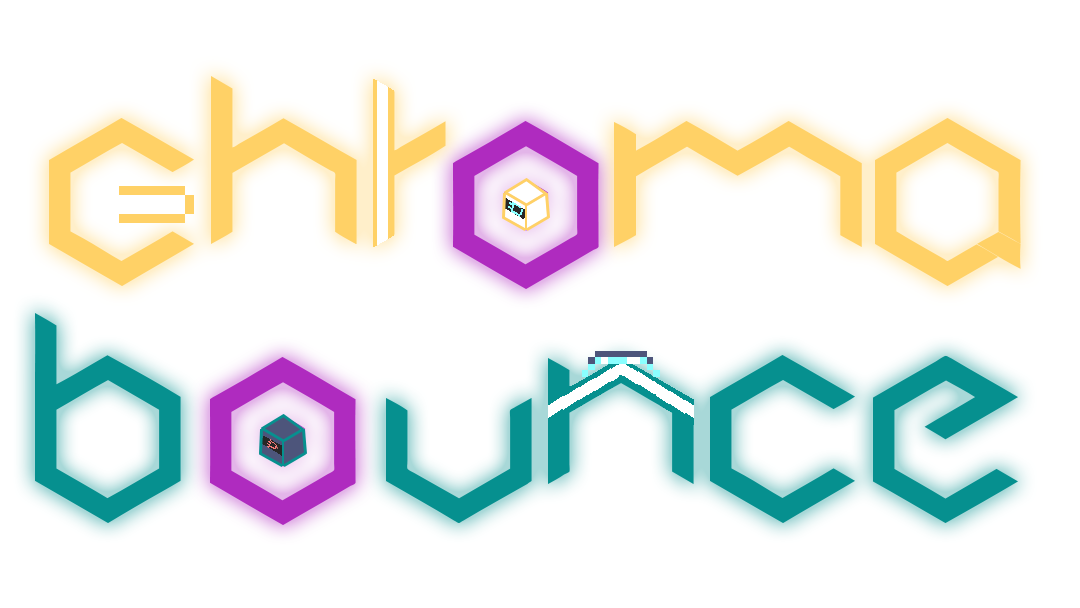
<style>
.page{position:relative;width:1080px;height:608px;background:#ffffff}
.page>*{position:absolute;margin:0}
.t1{font:197.6px "Cubic";color:#ffd166}
.t2{font:197.6px "Cubic";color:#af2bbf}
.t3{font:197.6px "Cubic";color:#06908f}
</style>
<div class="page">
<p class="t1" style="left:49px;top:76px;width:972px;height:210px">Chr ma</p>
<p class="t2" style="left:453px;top:121px;width:146px;height:168px">o</p>
<p class="t3" style="left:35px;top:313px;width:983px;height:210px">B  unce</p>
<p class="t2" style="left:210px;top:357px;width:146px;height:168px">o</p>
</div>
